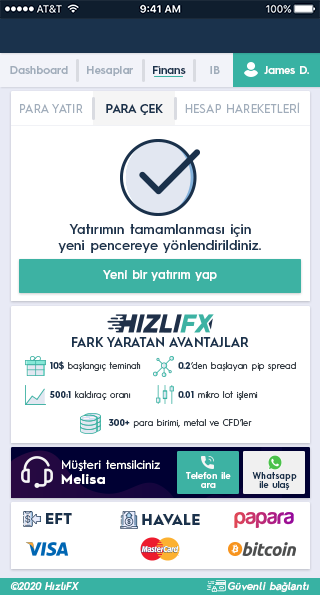
<style>
.page{position:relative;width:320px;height:595px;background:#ffffff}
.page>*{position:absolute;margin:0}
.t1{font:11.1px "HurmeGeometricSans3-SemiBold";color:#a1adbb}
.t2{font:11.1px "HurmeGeometricSans3-SemiBold";color:#1a324c}
.t3{font:11.1px "HurmeGeometricSans3-SemiBold";color:#fefefe}
.t4{font:11.9px "HurmeGeometricSans1-Regular";color:#a1adbb}
.t5{font:11.9px "HurmeGeometricSans1-SemiBold";color:#1a324c}
.t6{font:13.6px "HurmeGeometricSans3-SemiBold";letter-spacing:0.01em;color:#1a324c}
.t7{font:11.9px "HurmeGeometricSans3-SemiBold";letter-spacing:0.025em;color:#ffffff}
.t8{font:12.8px "HurmeGeometricSans1-SemiBold";color:#1a324c}
.t9{font:9px "HurmeGeometricSans1-Regular";color:#3a4149}
.t10{font:9px "HurmeGeometricSans1-Bold";color:#1a324c}
.t11{font:11.9px/15.4px "HurmeGeometricSans1-Regular";letter-spacing:0.025em;color:#ffffff}
.t12{font:13.6px/15.4px "HurmeGeometricSans1-Bold";letter-spacing:0.05em;color:#ffffff}
.t13{font:8.9px/8.9px "HurmeGeometricSans3-SemiBold";letter-spacing:0.01em;color:#ffffff}
.t14{font:8.9px/8.9px "HurmeGeometricSans3-SemiBold";letter-spacing:0.01em;color:#1a324c}
.t15{font:14.5px "HurmeGeometricSans1-Black";letter-spacing:0.025em;color:#1a324c}
.t16{font:10.2px "HurmeGeometricSans2-SemiBoldObl";letter-spacing:0.025em;color:#ffffff}
</style>
<div class="page">
<p class="t1" style="left:10px;top:66px;width:58px;height:8px">Dashboard</p>
<p class="t1" style="left:87px;top:66px;width:46px;height:10px">Hesaplar</p>
<p class="t2" style="left:153px;top:66px;width:33px;height:8px">Finans</p>
<p class="t1" style="left:210px;top:66px;width:10px;height:8px">IB</p>
<p class="t3" style="left:264px;top:66px;width:45px;height:8px">James D.</p>
<p class="t4" style="left:185px;top:102px;width:115px;height:11px">HESAP HAREKETLERİ</p>
<p class="t4" style="left:20px;top:104px;width:63px;height:9px">PARA YATIR</p>
<p class="t5" style="left:106px;top:104px;width:57px;height:11px">PARA ÇEK</p>
<p class="t6" style="left:58px;top:224px;width:203px;height:29px;text-align:center">Yatırımın tamamlanması için<br>yeni pencereye yönlendirildiniz.</p>
<p class="t7" style="left:103px;top:270px;width:114px;height:11px">Yeni bir yatırım yap</p>
<p class="t8" style="left:72px;top:337px;width:177px;height:10px">FARK YARATAN AVANTAJLAR</p>
<p class="t9" style="left:50px;top:361px;width:91px;height:10px"><span class="t10">10$</span> başlangıç teminatı</p>
<p class="t9" style="left:178px;top:362px;width:118px;height:9px"><span class="t10">0.2</span>‘den başlayan pip spread</p>
<p class="t9" style="left:49px;top:391px;width:82px;height:9px"><span class="t10">500:1</span> kaldıraç oranı</p>
<p class="t9" style="left:178px;top:391px;width:80px;height:9px"><span class="t10">0.01</span> mikro lot işlemi</p>
<p class="t9" style="left:108px;top:419px;width:144px;height:9px"><span class="t10">300+</span> para birimi, metal ve CFD’ler</p>
<p class="t11" style="left:61px;top:460px;width:99px;height:24px">Müşteri temsilciniz<br><span class="t12">Melisa</span></p>
<p class="t13" style="left:186px;top:472px;width:45px;height:16px;text-align:center">Telefon ile<br>ara</p>
<p class="t14" style="left:252px;top:472px;width:45px;height:18px;text-align:center">Whatsapp<br>ile ulaş</p>
<p class="t15" style="left:46px;top:513px;width:26px;height:11px">EFT</p>
<p class="t15" style="left:142px;top:514px;width:58px;height:11px">HAVALE</p>
<p class="t16" style="left:10px;top:582px;width:69px;height:8px">©2020 HızlıFX</p>
<p class="t16" style="left:228px;top:582px;width:81px;height:10px">Güvenli bağlantı</p>
</div>
